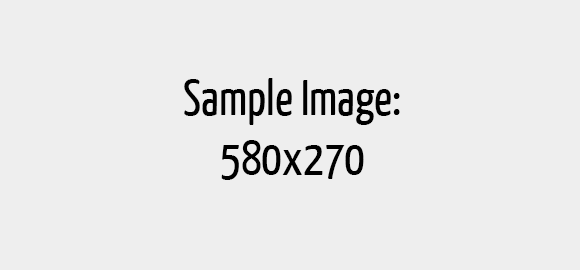
<style>
.page{position:relative;width:580px;height:270px;background:#eeeeee}
.page>*{position:absolute;margin:0}
.t1{font:50px "YanoneKaffeesatz-Regular";color:#000000}
</style>
<div class="page">
<p class="t1" style="left:184px;top:78px;width:216px;height:102px;text-align:center">Sample Image:<br>580x270</p>
</div>
